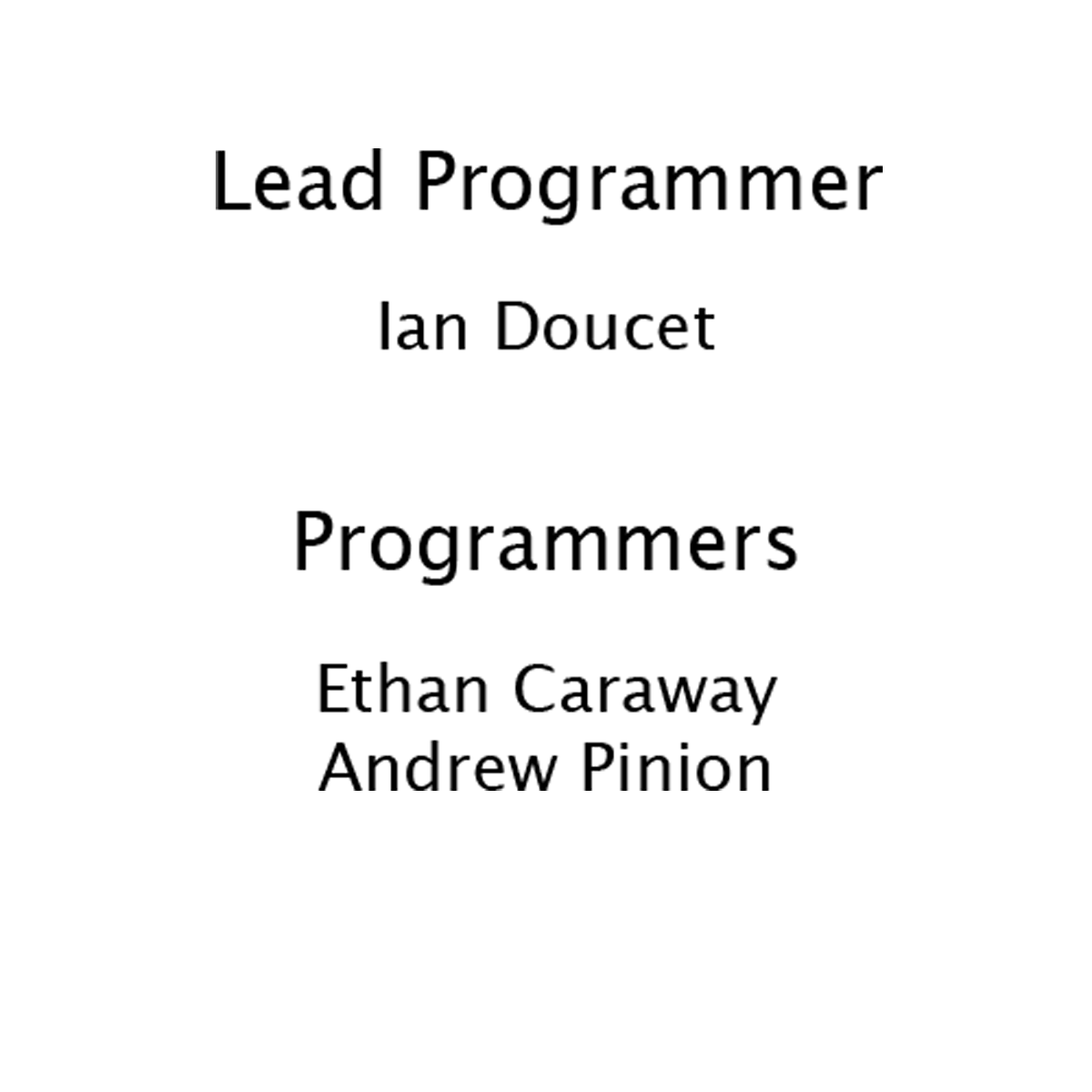
<style>
.page{position:relative;width:1092px;height:1092px;background:#ffffff}
.page>*{position:absolute;margin:0}
.t1{font:65.5px "LucidaGrande";color:#000000}
.t2{font:52.4px "LucidaGrande";color:#000000}
.t3{font:78.6px "LucidaGrande";color:#000000}
</style>
<div class="page">
<p class="t1" style="left:216px;top:148px;width:667px;height:643px;text-align:center"><span class="t2"><br><br></span><span class="t3">Lead Programmer<br><br></span>Ian Doucet<br><br><span class="t3">Programmers<br><br></span>Ethan Caraway<br>Andrew Pinion</p>
</div>
